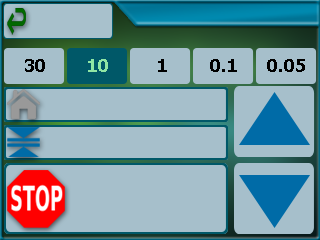
<style>
.page{position:relative;width:320px;height:240px;background:#a6bfcb}
.page>*{position:absolute;margin:0}
.t1{font:18px "Tahoma-Bold";color:#000000}
.t2{font:18px "Tahoma-Bold";color:#90e6a4}
</style>
<div class="page">
<p class="t1" style="left:25px;top:59px;width:20px;height:13px">30</p>
<p class="t2" style="left:88px;top:59px;width:20px;height:13px">10</p>
<p class="t1" style="left:158px;top:59px;width:9px;height:13px">1</p>
<p class="t1" style="left:210px;top:59px;width:27px;height:13px">0.1</p>
<p class="t1" style="left:267px;top:59px;width:38px;height:13px">0.05</p>
</div>
